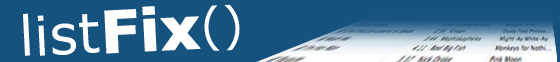
<style>
.page{position:relative;width:560px;height:62px;background:#15527e}
.page>*{position:absolute;margin:0}
.t1{font:55.1px "Verdana";color:#ffffff}
.t2{font:58px "Verdana-Bold";color:#ffffff;font-weight:bold}
.t3{font:47.1px "Verdana";color:#ffffff}
</style>
<div class="page">
<p class="t1" style="left:23px;top:4px;width:217px;height:52px;rotate:-3deg">list<span class="t2">Fix</span><span class="t3">()</span></p>
</div>
